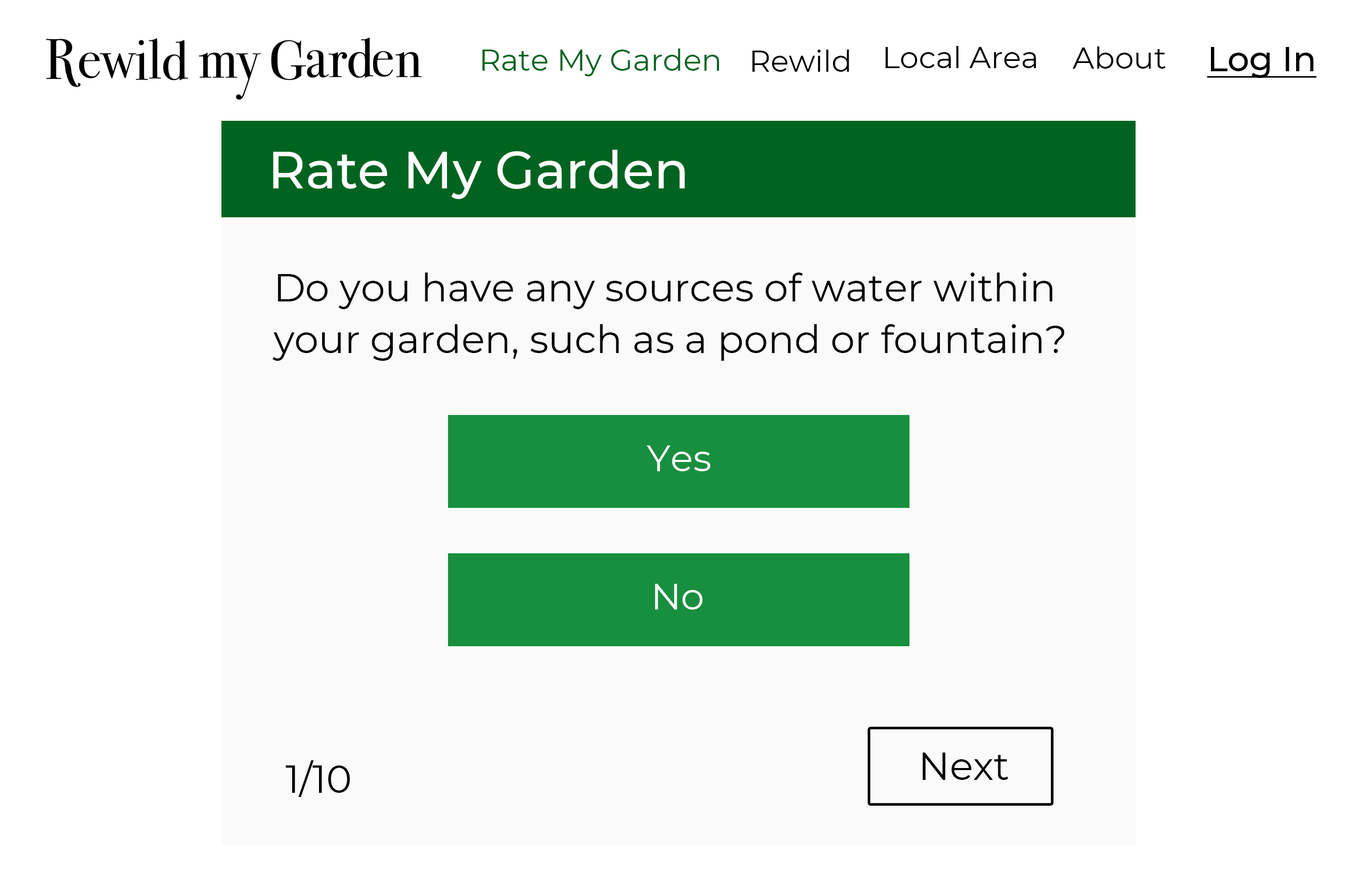
<style>
.page{position:relative;width:1357px;height:879px;background:#ffffff}
.page>*{position:absolute;margin:0}
.t1{font:30.1px "Montserrat-Regular";color:#006420}
.t2{font:30.1px "Montserrat-Regular";color:#000000}
.t3{font:30.1px "Montserrat-Regular";color:#010000}
.t4{font:34.4px "Montserrat-Medium";color:#000000;text-decoration:underline}
.t5{font:51.6px "Montserrat-Medium";color:#ffffff}
.t6{font:38.7px/51.6px "Montserrat-Regular";color:#000000}
.t7{font:38.7px/25.8px "Montserrat-Regular";color:#000000}
.t8{font:37.2px "Montserrat-Regular";color:#ffffff}
.t9{font:38.7px "Montserrat-Regular";color:#000000}
</style>
<div class="page">
<p class="t1" style="left:482px;top:49px;width:237px;height:27px">Rate My Garden</p>
<p class="t2" style="left:752px;top:50px;width:97px;height:22px">Rewild</p>
<p class="t3" style="left:885px;top:46px;width:151px;height:22px">Local Area</p>
<p class="t3" style="left:1072px;top:46px;width:93px;height:23px">About</p>
<p class="t4" style="left:1207px;top:47px;width:110px;height:31px">Log In</p>
<p class="t5" style="left:273px;top:150px;width:412px;height:49px">Rate My Garden</p>
<p class="t6" style="left:272px;top:272px;width:792px;height:89px"><span class="t7">Do you have a</span>ny sources of water within your garden, such as a pond or fountain?</p>
<p class="t8" style="left:647px;top:445px;width:63px;height:26px">Yes</p>
<p class="t8" style="left:655px;top:584px;width:47px;height:25px">No</p>
<p class="t9" style="left:285px;top:760px;width:65px;height:37px">1/10</p>
<p class="t9" style="left:922px;top:752px;width:86px;height:28px">Next</p>
</div>
